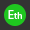
<style>
.page{position:relative;width:30px;height:30px;background:#333333}
.page>*{position:absolute;margin:0}
.t1{font:9px "MyriadPro-Regular";color:#ffffff}
.t2{font:12.5px "MyriadPro-Regular";color:#ffffff;text-transform:uppercase}
</style>
<div class="page">
<p class="t1" style="left:8px;top:10px;width:14px;height:9px"><span class="t2">E</span>th</p>
</div>
